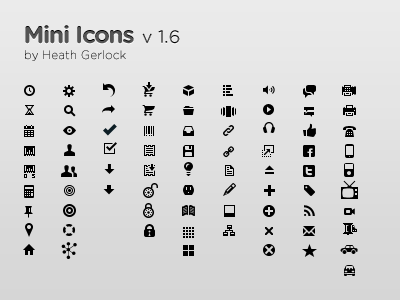
<style>
.page{position:relative;width:400px;height:300px}
.page>*{position:absolute;margin:0}
.t1{font:24px "GothamRounded-Bold";letter-spacing:-0.05em;color:#545454}
.t2{font:18px "GothamRounded-Book"}
.t3{font:12px "GothamRounded-Light"}
</style>
<div class="page">
<p class="t1" style="left:25px;top:25px;width:109px;height:19px">Mini Icons</p>
<p class="t2" style="left:142px;top:30px;width:38px;height:14px">v 1.6</p>
<p class="t3" style="left:25px;top:50px;width:101px;height:11px">by Heath Gerlock</p>
</div>
